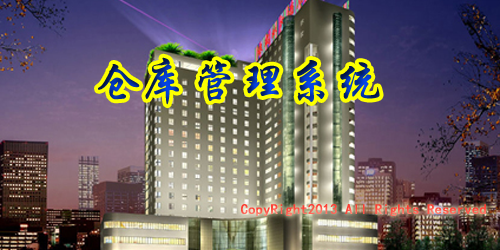
<style>
.page{position:relative;width:500px;height:250px}
.page>*{position:absolute;margin:0}
.t1{font:47.2px "STXingkai";font-weight:bold}
.t2{font:14.2px "SimHei";font-weight:bold}
</style>
<div class="page">
<p class="t1" style="left:98px;top:57px;width:282px;height:48px">仓库管理系统</p>
<p class="t2" style="left:241px;top:204px;width:245px;height:12px">CopyRight2013 All Rights Reserved</p>
</div>
